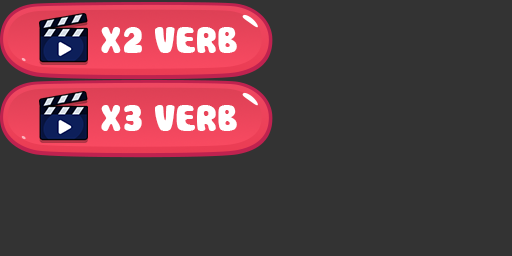
<style>
.page{position:relative;width:512px;height:256px;background:#333333}
.page>*{position:absolute;margin:0}
.t1{font:36px "Cookies";color:#ffffff}
</style>
<div class="page">
<p class="t1" style="left:101px;top:27px;width:41px;height:26px">X2</p>
<p class="t1" style="left:155px;top:27px;width:82px;height:26px">VERB</p>
<p class="t1" style="left:101px;top:105px;width:41px;height:26px">X3</p>
<p class="t1" style="left:155px;top:105px;width:82px;height:26px">VERB</p>
</div>
